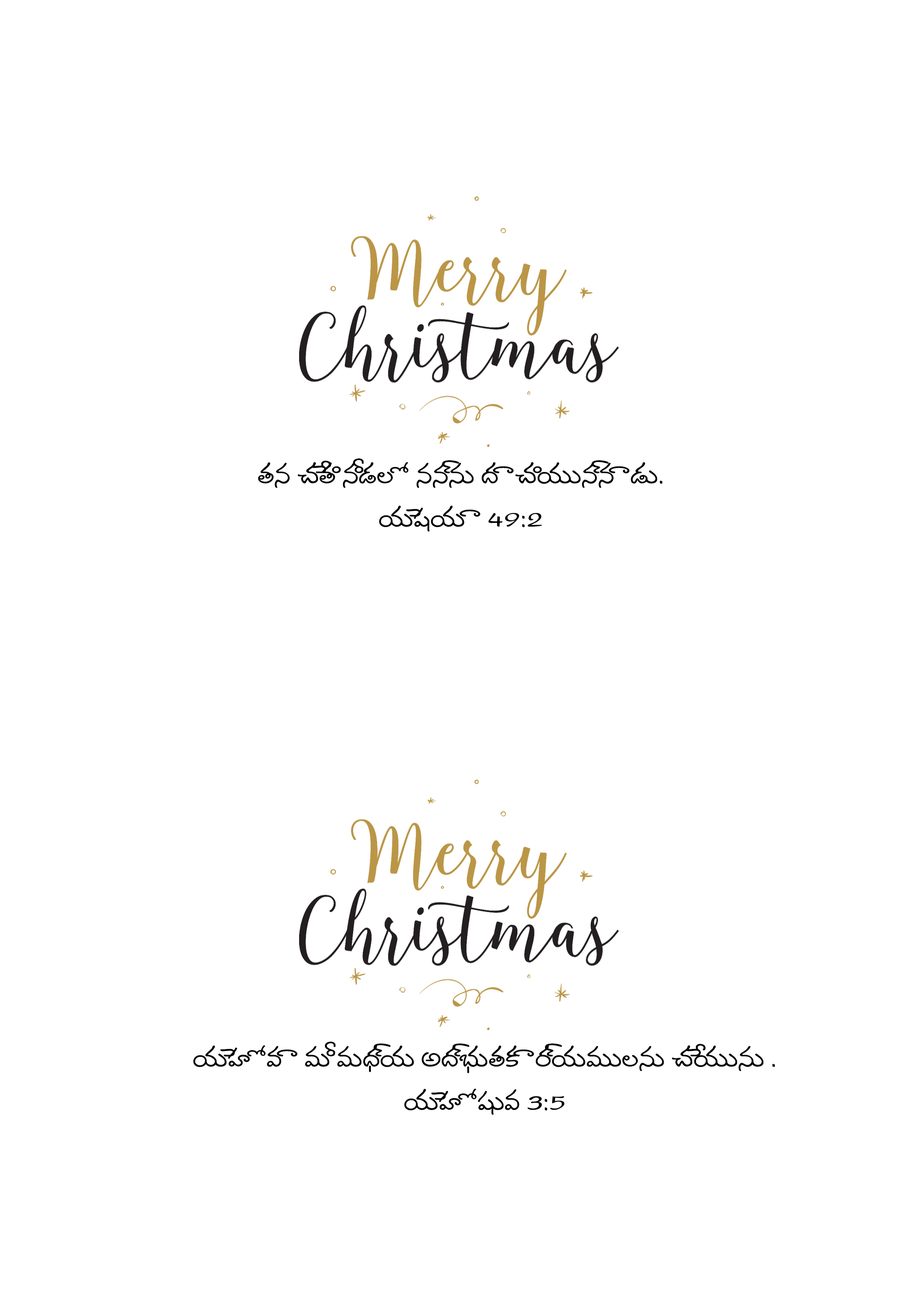
<style>
.page{position:relative;width:918px;height:1299px;background:#ffffff}
.page>*{position:absolute;margin:0}
.t1{font:28.2px/21.6px "NTR";color:#000000;text-transform:uppercase}
</style>
<div class="page">
<p class="t1" style="left:258px;top:458px;width:405px;height:74px;text-align:center">తన చేతి నీడలో నన్ను దాచియున్నాడు. <br><br>యెషయా 49:2</p>
<p class="t1" style="left:193px;top:1041px;width:582px;height:74px;text-align:center">యెహోవా మీ మధ్య అద్భుతకార్యములను చేయును .<br><br>యెహోషువ 3:5</p>
</div>
